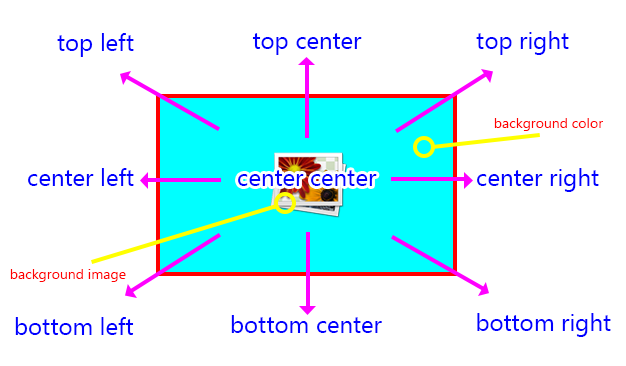
<style>
.page{position:relative;width:626px;height:366px;background:#ffffff}
.page>*{position:absolute;margin:0}
.t1{font:24px "SegoeUI";color:#0000ff}
.t2{font:14px "SegoeUI";color:#ff0000}
</style>
<div class="page">
<p class="t1" style="left:57px;top:33px;width:77px;height:24px">top left</p>
<p class="t1" style="left:252px;top:33px;width:110px;height:22px">top center</p>
<p class="t1" style="left:476px;top:31px;width:93px;height:24px">top right</p>
<p class="t2" style="left:494px;top:118px;width:109px;height:13px">background color</p>
<p class="t1" style="left:28px;top:168px;width:106px;height:18px">center left</p>
<p class="t1" style="left:238px;top:170px;width:139px;height:16px">center center</p>
<p class="t1" style="left:477px;top:168px;width:122px;height:24px">center right</p>
<p class="t2" style="left:10px;top:269px;width:116px;height:13px">background image</p>
<p class="t1" style="left:15px;top:317px;width:119px;height:18px">bottom left</p>
<p class="t1" style="left:231px;top:315px;width:151px;height:18px">bottom center</p>
<p class="t1" style="left:477px;top:313px;width:134px;height:24px">bottom right</p>
</div>
